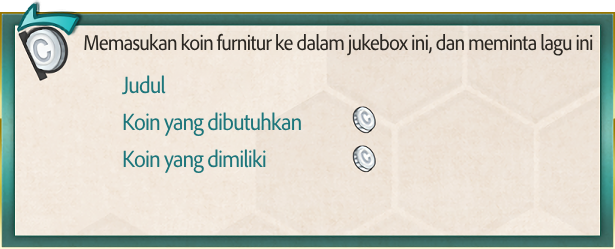
<style>
.page{position:relative;width:615px;height:249px}
.page>*{position:absolute;margin:0}
.t1{font:22px "AdobeClean-Regular";letter-spacing:-0.04em;color:#2b2722;scale:0.9 1}
.t2{font:24px "AdobeClean-Regular";letter-spacing:-0.04em;color:#1d767b;scale:0.9 1}
</style>
<div class="page">
<p class="t1" style="left:84px;top:33px;width:509px;height:23px">Memasukan koin furnitur ke dalam jukebox ini, dan meminta lagu ini</p>
<p class="t2" style="left:122px;top:75px;width:44px;height:20px">Judul</p>
<p class="t2" style="left:123px;top:112px;width:178px;height:25px">Koin yang dibutuhkan</p>
<p class="t2" style="left:123px;top:149px;width:143px;height:25px">Koin yang dimiliki</p>
</div>
